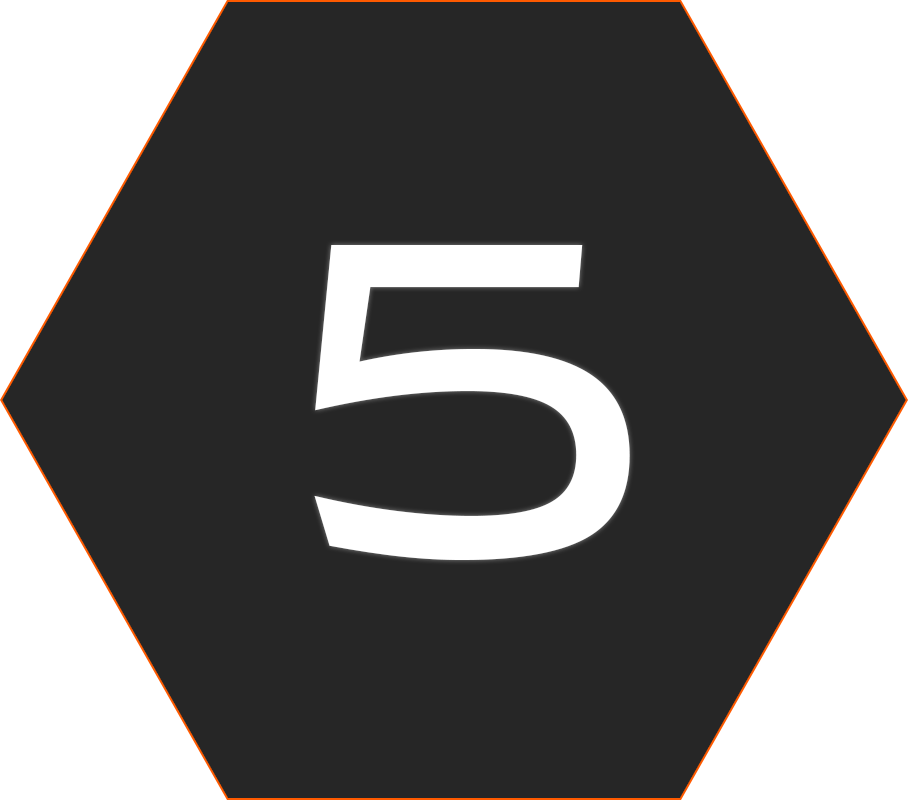
<style>
.page{position:relative;width:908px;height:800px;background:#262626}
.page>*{position:absolute;margin:0}
.t1{font:600px "BankGothicBT-Light";color:#ffffff}
</style>
<div class="page">
<p class="t1" style="left:314px;top:245px;width:316px;height:315px">5</p>
</div>
